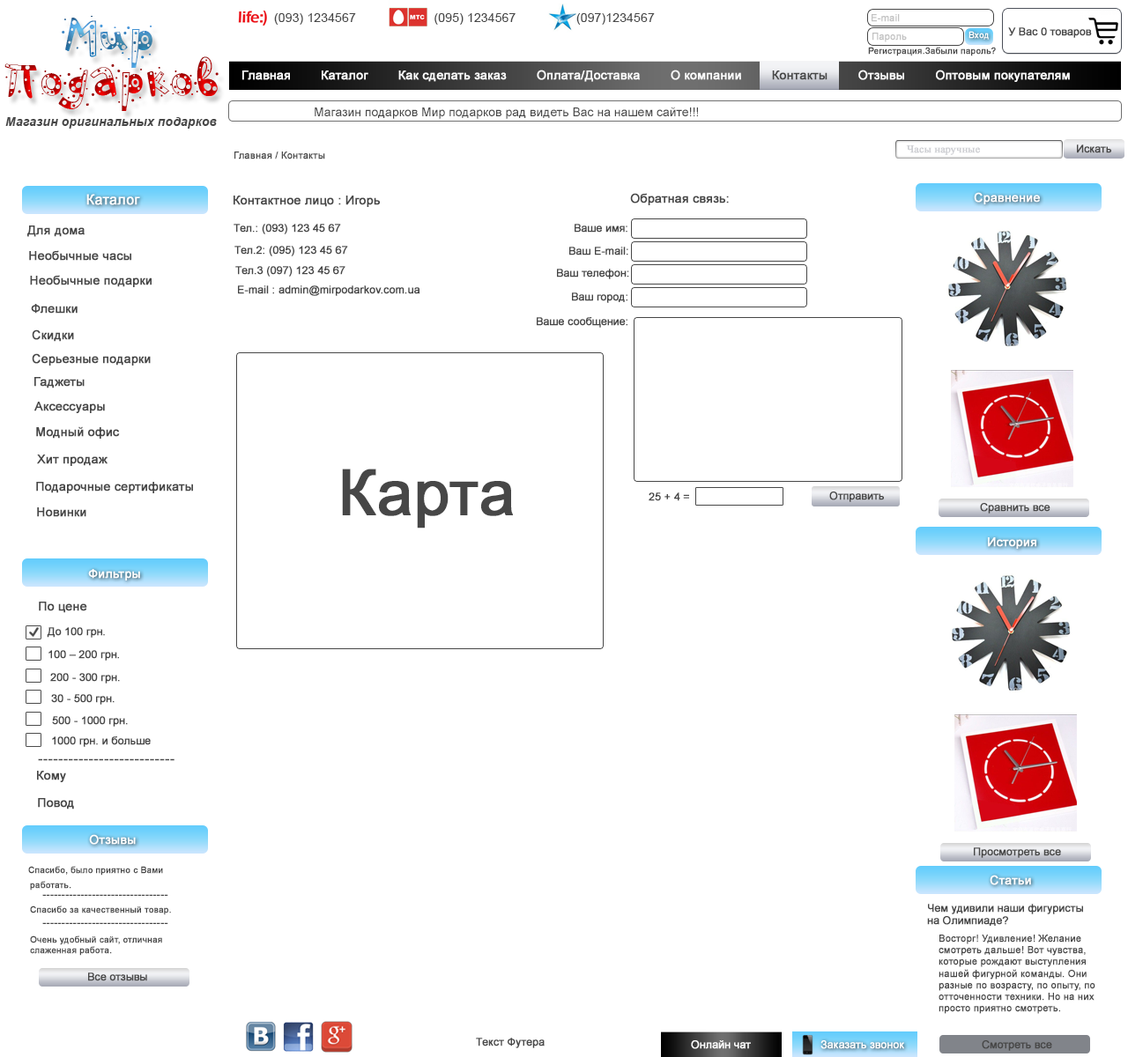
<style>
.page{position:relative;width:1128px;height:1057px;background:#ffffff}
.page>*{position:absolute;margin:0}
.t1{font:70.5px "PFPlayskoolPro-Confetti";letter-spacing:0.01em}
.t2{font:63.4px "PFPlayskoolPro-Confetti";letter-spacing:0.01em}
.t3{font:12.3px "ArialMT";letter-spacing:0.01em;color:#474747}
.t4{font:9.7px "ArialMT";color:#c1c1c1;font-weight:bold}
.t5{font:10.6px "ArialMT";color:#474747;font-weight:bold}
.t6{font:8.8px "ArialMT";color:#ffffff;font-weight:bold}
.t7{font:8.8px "ArialMT";color:#474747;font-weight:bold}
.t8{font:12.3px "ArialMT";color:#ffffff;font-weight:bold}
.t9{font:12.3px "ArialMT";color:#474747;font-weight:bold}
.t10{font:12.3px "ArialMT";color:#474747}
.t11{font:12.3px "Arial-BoldItalicMT";letter-spacing:0.01em;color:#474747}
.t12{font:10.6px "TimesNewRomanPSMT";color:#cecfd3;font-weight:bold}
.t13{font:9.7px "ArialMT";color:#474747;font-weight:bold}
.t14{font:14.1px "ArialMT";color:#ffffff;font-weight:bold}
.t15{font:63.4px "ArialMT";color:#474747;font-weight:bold}
.t16{font:14.1px "TimesNewRomanPSMT";color:#474747;font-weight:bold}
.t17{font:10.6px "TimesNewRomanPSMT";color:#474747;font-weight:bold}
.t18{font:10.6px "ArialMT";color:#ffffff;font-weight:bold}
</style>
<div class="page">
<p class="t1" style="left:62px;top:16px;width:90px;height:52px"><span class="t2">  </span> Мир</p>
<p class="t3" style="left:274px;top:13px;width:381px;height:12px">(093) 1234567                      (095) 1234567                 (097)1234567</p>
<p class="t4" style="left:871px;top:14px;width:29px;height:8px">E-mail</p>
<p class="t5" style="left:1008px;top:27px;width:84px;height:11px">У Вас 0 товаров</p>
<p class="t4" style="left:872px;top:33px;width:35px;height:9px">Пароль</p>
<p class="t6" style="left:968px;top:31px;width:21px;height:9px">Вход</p>
<p class="t7" style="left:868px;top:47px;width:128px;height:9px">Регистрация.Забыли пароль?</p>
<p class="t1" style="left:4px;top:56px;width:215px;height:55px">Подарков</p>
<p class="t8" style="left:242px;top:70px;width:828px;height:12px">Главная        Каталог        Как сделать заказ        Оплата/Доставка        О компании        <span class="t9">Контакты</span>        Отзывы        Оптовым покупателям</p>
<p class="t10" style="left:315px;top:107px;width:383px;height:12px">Магазин подарков Мир подарков рад видеть Вас на нашем сайте!!!</p>
<p class="t11" style="left:5px;top:117px;width:212px;height:12px">Магазин оригинальных подарков</p>
<p class="t12" style="left:906px;top:145px;width:74px;height:10px">Часы наручные</p>
<p class="t5" style="left:1077px;top:144px;width:34px;height:9px">Искать</p>
<p class="t13" style="left:234px;top:152px;width:91px;height:7px">Главная / Контакты</p>
<p class="t14" style="left:86px;top:194px;width:54px;height:11px">Каталог</p>
<p class="t9" style="left:233px;top:196px;width:147px;height:11px">Контактное лицо : Игорь</p>
<p class="t9" style="left:630px;top:193px;width:99px;height:12px">Обратная связь:</p>
<p class="t8" style="left:974px;top:192px;width:66px;height:12px">Сравнение</p>
<p class="t9" style="left:27px;top:226px;width:58px;height:11px">Для дома</p>
<p class="t5" style="left:233px;top:224px;width:108px;height:10px">Тел.: (093) 123 45 67</p>
<p class="t5" style="left:574px;top:224px;width:53px;height:9px">Ваше имя:</p>
<p class="t5" style="left:234px;top:246px;width:114px;height:10px">Тел.2: (095) 123 45 67</p>
<p class="t9" style="left:29px;top:250px;width:102px;height:11px">Необычные часы</p>
<p class="t5" style="left:569px;top:247px;width:59px;height:9px">Ваш E-mail:</p>
<p class="t5" style="left:235px;top:266px;width:110px;height:11px">Тел.3 (097) 123 45 67</p>
<p class="t5" style="left:557px;top:269px;width:72px;height:10px">Ваш телефон:</p>
<p class="t9" style="left:30px;top:275px;width:122px;height:12px">Необычные подарки</p>
<p class="t5" style="left:238px;top:285px;width:182px;height:11px">E-mail : admin@mirpodarkov.com.ua</p>
<p class="t5" style="left:572px;top:293px;width:55px;height:10px">Ваш город:</p>
<p class="t9" style="left:31px;top:304px;width:47px;height:10px">Флешки</p>
<p class="t5" style="left:537px;top:317px;width:90px;height:11px">Ваше сообщение:</p>
<p class="t9" style="left:32px;top:330px;width:42px;height:12px">Скидки</p>
<p class="t9" style="left:32px;top:353px;width:119px;height:13px">Серьезные подарки</p>
<p class="t9" style="left:34px;top:377px;width:51px;height:12px">Гаджеты</p>
<p class="t9" style="left:34px;top:402px;width:71px;height:11px">Аксессуары</p>
<p class="t9" style="left:36px;top:426px;width:84px;height:13px">Модный офис</p>
<p class="t9" style="left:37px;top:455px;width:70px;height:11px">Хит продаж</p>
<p class="t15" style="left:342px;top:469px;width:171px;height:60px">Карта</p>
<p class="t9" style="left:36px;top:482px;width:157px;height:11px">Подарочные сертификаты</p>
<p class="t5" style="left:648px;top:493px;width:41px;height:8px">25 + 4 =</p>
<p class="t5" style="left:829px;top:492px;width:55px;height:10px">Отправить</p>
<p class="t9" style="left:37px;top:508px;width:49px;height:9px">Новинки</p>
<p class="t5" style="left:980px;top:503px;width:70px;height:11px">Сравнить все</p>
<p class="t8" style="left:988px;top:537px;width:48px;height:12px">История</p>
<p class="t8" style="left:88px;top:569px;width:52px;height:12px">Фильтры</p>
<p class="t9" style="left:39px;top:602px;width:48px;height:11px">По цене</p>
<p class="t5" style="left:47px;top:627px;width:58px;height:11px">До 100 грн.</p>
<p class="t5" style="left:48px;top:650px;width:71px;height:11px">100 – 200 грн.</p>
<p class="t5" style="left:50px;top:673px;width:70px;height:11px">200 - 300 грн.</p>
<p class="t5" style="left:51px;top:694px;width:64px;height:11px">30 - 500 грн.</p>
<p class="t5" style="left:52px;top:716px;width:76px;height:11px">500 - 1000 грн.</p>
<p class="t5" style="left:52px;top:737px;width:99px;height:10px">1000 грн. и больше</p>
<p class="t16" style="left:38px;top:759px;width:136px;height:2px">---------------------------</p>
<p class="t9" style="left:37px;top:771px;width:29px;height:11px">Кому</p>
<p class="t9" style="left:38px;top:798px;width:36px;height:12px">Повод</p>
<p class="t8" style="left:89px;top:834px;width:47px;height:11px">Отзывы</p>
<p class="t5" style="left:974px;top:848px;width:87px;height:10px">Просмотреть все</p>
<p class="t7" style="left:28px;top:866px;width:135px;height:10px">Спасибо, было приятно с Вами</p>
<p class="t7" style="left:30px;top:881px;width:41px;height:10px">работать.</p>
<p class="t8" style="left:989px;top:875px;width:42px;height:10px">Статьи</p>
<p class="t7" style="left:30px;top:906px;width:141px;height:9px">Спасибо за качественный товар.</p>
<p class="t17" style="left:42px;top:894px;width:126px;height:2px">---------------------------------</p>
<p class="t5" style="left:927px;top:904px;width:156px;height:22px">Чем удивили наши фигуристы<br>на Олимпиаде?</p>
<p class="t17" style="left:42px;top:923px;width:126px;height:1px">---------------------------------</p>
<p class="t7" style="left:30px;top:936px;width:132px;height:20px">Очень удобный сайт, отличная <br>слаженная работа.</p>
<p class="t13" style="left:938px;top:935px;width:157px;height:79px">Восторг! Удивление! Желание <br>смотреть дальше! Вот чувства, <br>которые рождают выступления <br>нашей фигурной команды. Они <br>разные по возрасту, по опыту, по <br>отточенности техники. Но на них <br>просто приятно смотреть.</p>
<p class="t5" style="left:88px;top:973px;width:59px;height:9px">Все отзывы</p>
<p class="t5" style="left:476px;top:1038px;width:69px;height:10px">Текст Футера</p>
<p class="t18" style="left:691px;top:1041px;width:60px;height:8px">Онлайн чат</p>
<p class="t18" style="left:820px;top:1041px;width:84px;height:8px">Заказать звонок</p>
<p class="t5" style="left:982px;top:1041px;width:70px;height:10px">Смотреть все</p>
</div>
